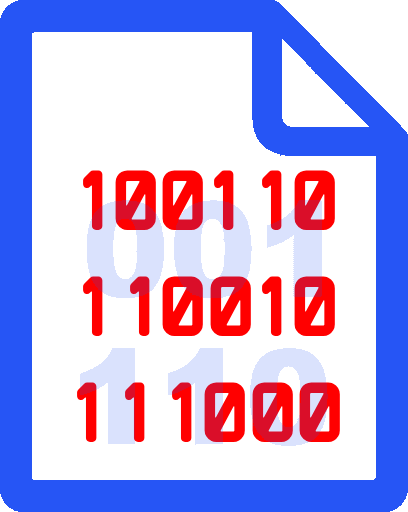
<style>
.page{position:relative;width:408px;height:512px;background:#ffffff}
.page>*{position:absolute;margin:0}
.t1{font:88px "MonomaniacOne-Regular";color:#ff0000}
</style>
<div class="page">
<p class="t1" style="left:77px;top:170px;width:263px;height:272px;text-align:center">100110<br>110010<br>111000</p>
</div>
